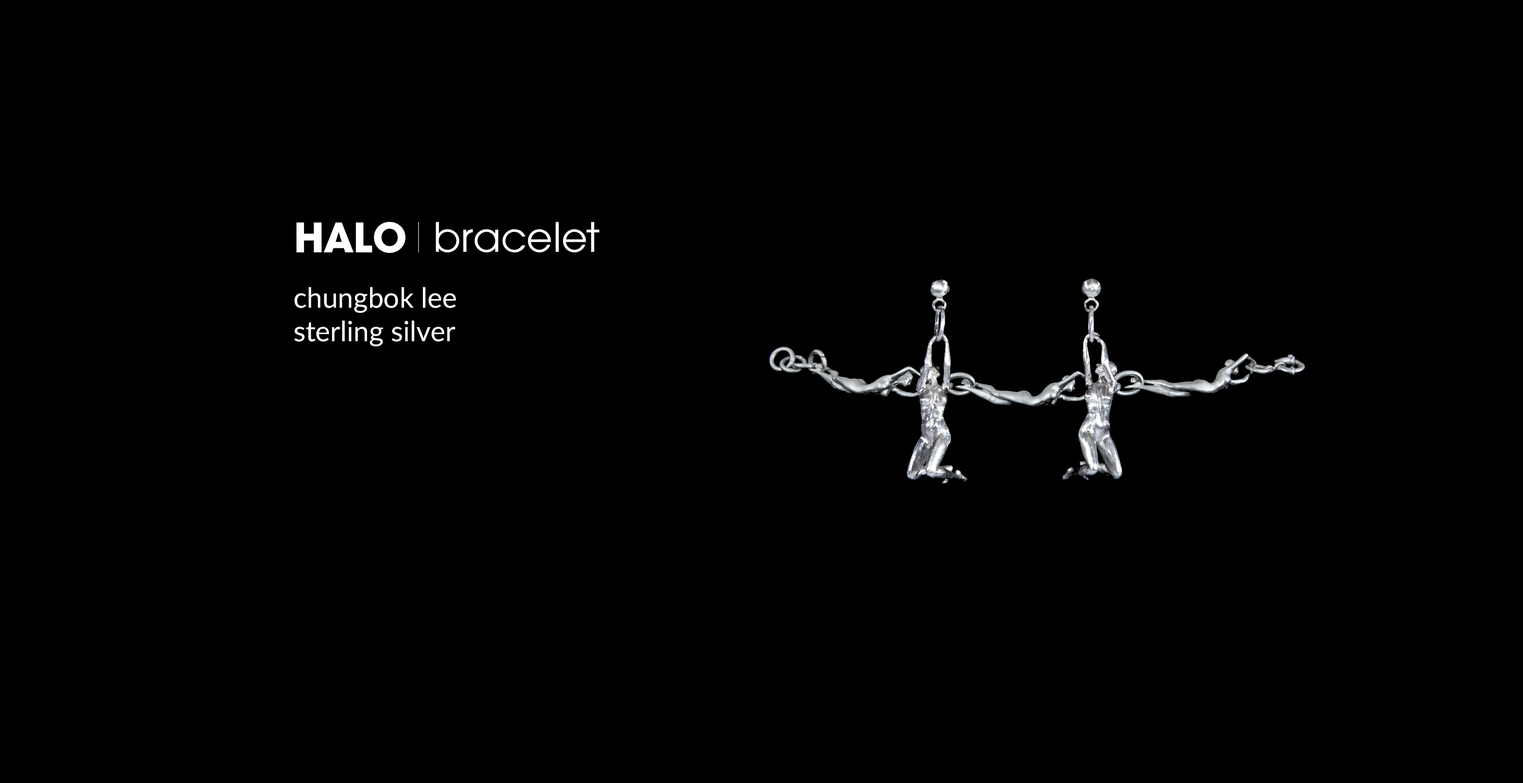
<style>
.page{position:relative;width:1523px;height:783px;background:#000000}
.page>*{position:absolute;margin:0}
.t1{font:44.7px "AvantGardEF-Bold";color:#ffffff}
.t2{font:44.7px "AvantGardEF-Book";color:#ffffff}
.t3{font:27.9px/33.5px "Lato-Regular";color:#ffffff}
</style>
<div class="page">
<p class="t1" style="left:297px;top:222px;width:109px;height:31px">HALO</p>
<p class="t2" style="left:436px;top:222px;width:164px;height:30px">bracelet</p>
<p class="t3" style="left:294px;top:287px;width:162px;height:59px">chungbok lee<br>sterling silver</p>
</div>
